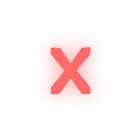
<style>
.page{position:relative;width:140px;height:140px;background:#ffffff}
.page>*{position:absolute;margin:0}
.t1{font:100px "BerlinSansFB-Reg";color:#ff6a6a}
</style>
<div class="page">
<p class="t1" style="left:50px;top:47px;width:41px;height:48px">x</p>
</div>
